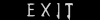
<style>
.page{position:relative;width:100px;height:20px;background:#000000}
.page>*{position:absolute;margin:0}
.t1{font:21.1px "RWBY_Style";letter-spacing:0.24em;color:#d4d4d4;scale:1.08 1}
</style>
<div class="page">
<p class="t1" style="left:27px;top:2px;width:46px;height:18px">exit</p>
</div>
